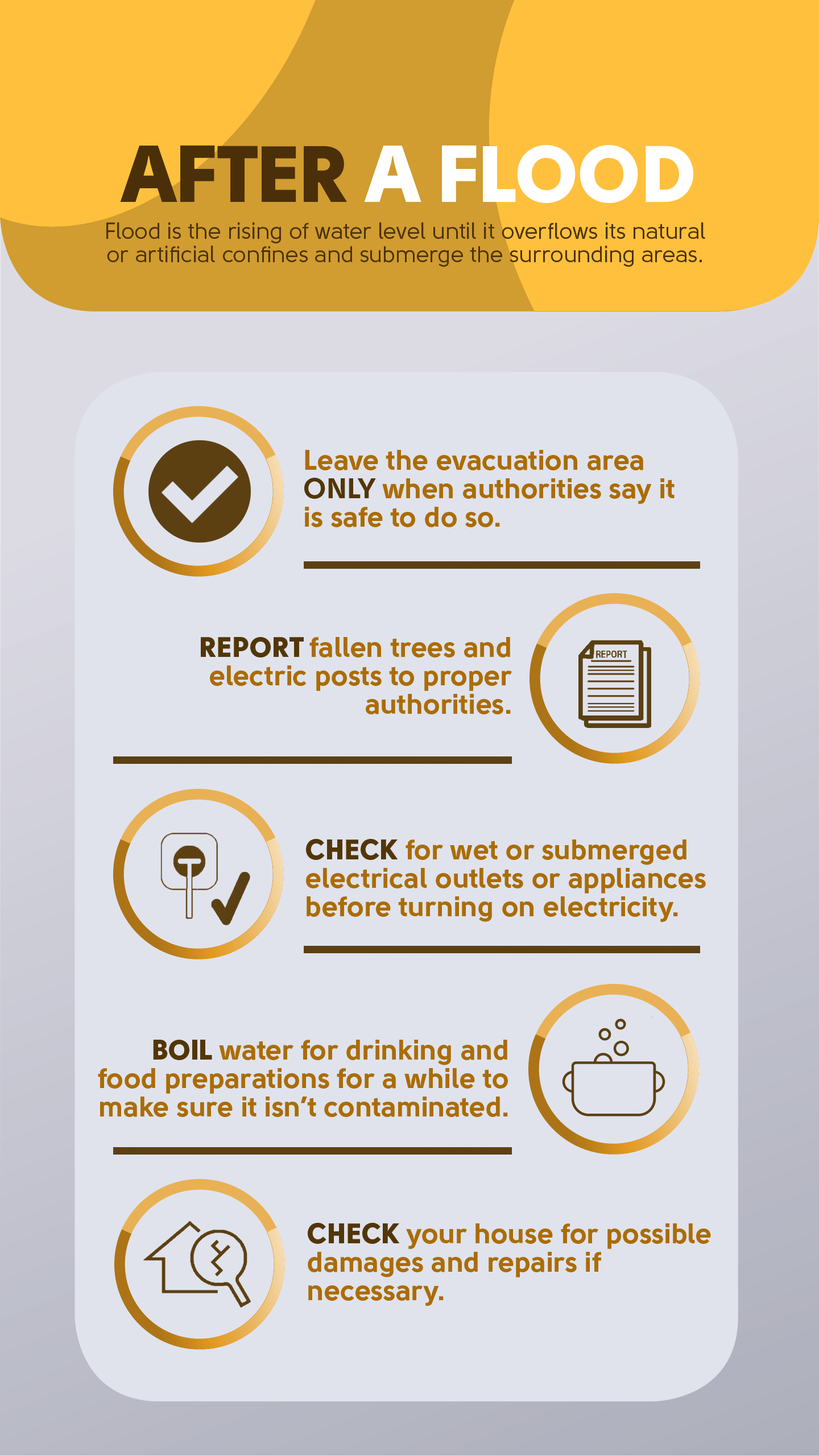
<style>
.page{position:relative;width:819px;height:1456px;background:#e0e3ec}
.page>*{position:absolute;margin:0}
.t1{font:79.6px "Solomon-Sans-Black";color:#ffffff}
.t2{font:79.6px "Solomon-Sans-Black";color:#4a2f08}
.t3{font:22.7px/23.3px "Solomon-Sans-Normal";color:#4c330a}
.t4{font:28.4px/28.4px "Solomon-Sans-Bold";color:#ab6c03}
.t5{font:28.4px/28.4px "Solomon-Sans-Bold";color:#523606}
.t6{font:28.4px/28.4px "Solomon-Sans-Black";color:#523606}
</style>
<div class="page">
<p class="t1" style="left:120px;top:145px;width:573px;height:58px"><span class="t2">AFTER </span>A FLOOD</p>
<p class="t3" style="left:106px;top:222px;width:599px;height:45px;text-align:center">Flood is the rising of water level until it overflows its natural<br>or artificial confines and submerge the surrounding areas.</p>
<p class="t4" style="left:304px;top:450px;width:371px;height:77px">Leave the evacuation area<br><span class="t5">ONLY </span>when authorities say it<br>is safe to do so.</p>
<p class="t4" style="left:201px;top:637px;width:311px;height:77px;text-align:right"><span class="t6">REPORT </span>fallen trees and<br>electric posts to proper<br>authorities.</p>
<p class="t4" style="left:306px;top:839px;width:400px;height:83px"><span class="t6">CHECK </span>for wet or submerged<br>electrical outlets or appliances<br>before turning on electricity.</p>
<p class="t4" style="left:98px;top:1040px;width:410px;height:77px;text-align:right"><span class="t6">BOIL </span>water for drinking and<br>food preparations for a while to<br>make sure it isn’t contaminated.</p>
<p class="t4" style="left:308px;top:1223px;width:403px;height:83px"><span class="t6">CHECK </span>your house for possible<br>damages and repairs if<br>necessary.</p>
</div>
